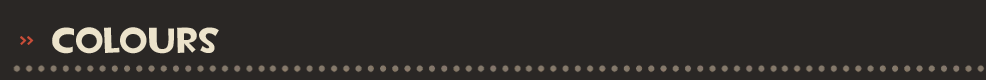
<style>
.page{position:relative;width:986px;height:80px;background:#2a2725}
.page>*{position:absolute;margin:0}
.t1{font:36px "TF2Build";letter-spacing:0.01em;color:#ece3cb}
</style>
<div class="page">
<p class="t1" style="left:52px;top:27px;width:167px;height:27px">Colours</p>
</div>
